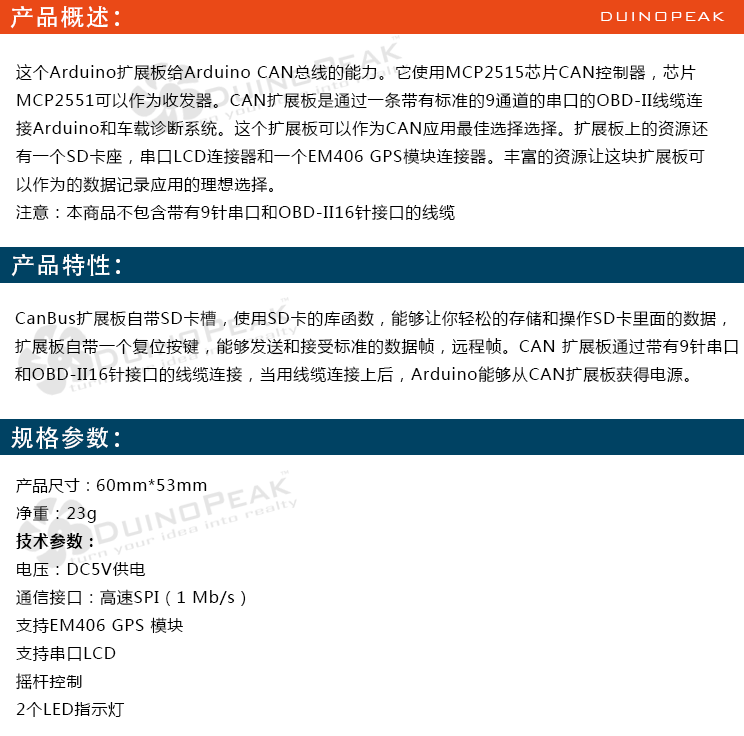
<style>
.page{position:relative;width:744px;height:736px;background:#ffffff}
.page>*{position:absolute;margin:0}
.t1{font:24px "AdobeHeitiStd-Regular";letter-spacing:0.05em;color:#ffffff}
.t2{font:18px "BankGothicBT-Light";letter-spacing:0.05em;color:#ffffff}
.t3{font:16px "MicrosoftYaHei";letter-spacing:0.05em;color:#000000}
.t4{font:16px "MicrosoftYaHei";color:#000000}
.t5{font:16px "MicrosoftYaHei-Bold";letter-spacing:0.05em;color:#000000}
</style>
<div class="page">
<p class="t1" style="left:10px;top:6px;width:109px;height:23px">产品概述：</p>
<p class="t2" style="left:601px;top:12px;width:124px;height:9px">DUINOPEAK</p>
<p class="t3" style="left:16px;top:64px;width:692px;height:157px">这个Arduino扩展板给Arduino CAN总线的能力。它使用MCP2515芯片CAN控制器，芯片<br>MCP2551可以作为收发器。CAN扩展板是通过一条带有标准的9通道的串口的OBD-II线缆连<br>接Arduino和车载诊断系统。这个扩展板可以作为CAN应用最佳选择选择。扩展板上的资源还<br>有一个SD卡座，串口LCD连接器和一个EM406 GPS模块连接器。丰富的资源让这块扩展板可<br>以作为的数据记录应用的理想选择。<br>注意：本商品不包含带有9针串口和OBD-II16针接口的线缆</p>
<p class="t1" style="left:11px;top:253px;width:109px;height:24px">产品特性：</p>
<p class="t3" style="left:15px;top:310px;width:723px;height:73px">CanBus扩展板自带SD卡槽，使用SD卡的库函数，能够让你轻松的存储和操作SD卡里面的数据，<br>扩展板自带一个复位按键，能够发送和接受标准的数据帧，远程帧。CAN 扩展板通过带有9针串口<br>和OBD-II16针接口的线缆连接，当用线缆连接上后，Arduino能够从CAN扩展板获得电源。</p>
<p class="t1" style="left:11px;top:426px;width:108px;height:23px">规格参数：</p>
<p class="t3" style="left:16px;top:478px;width:230px;height:239px"><span class="t4">产品尺寸：</span>60mm*53mm<br>净重：23g<br><span class="t5">技术参数：<br></span>电压：DC5V供电<br>通信接口：高速SPI（1 Mb/s）<br>支持EM406 GPS 模块<br>支持串口LCD<br>摇杆控制<br>2个LED指示灯</p>
</div>
